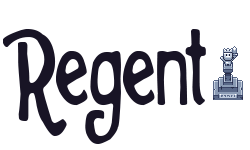
<style>
.page{position:relative;width:250px;height:150px;background:#ffffff}
.page>*{position:absolute;margin:0}
.t1{font:120px "BackToTheFantasy";color:#181425}
</style>
<div class="page">
<p class="t1" style="left:3px;top:29px;width:203px;height:115px">Regent</p>
</div>
